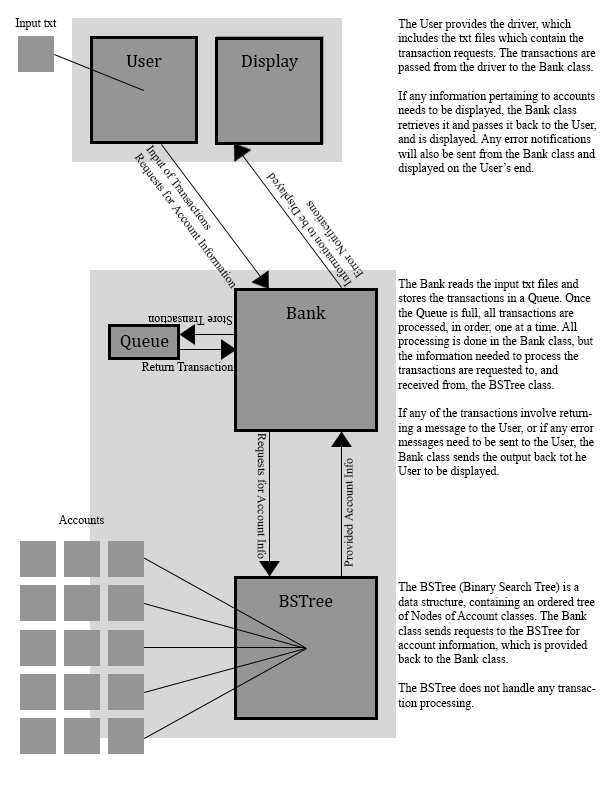
<style>
.page{position:relative;width:612px;height:792px;background:#ffffff}
.page>*{position:absolute;margin:0}
.t1{font:12px "TimesNewRomanPSMT";color:#000000}
.t2{font:18px "Cambria";color:#000000}
</style>
<div class="page">
<p class="t1" style="left:15px;top:18px;width:42px;height:12px">Input txt</p>
<p class="t1" style="left:398px;top:19px;width:199px;height:156px">The User provides the driver, which includes the txt files which contain the transaction requests. The transactions are passed from the driver to the Bank class. <br><br>If any information pertaining to accounts needs to be displayed, the Bank class retrieves it and passes it back to the User, and is displayed. Any error notifications will also be sent from the Bank class and displayed on the User’s end.</p>
<p class="t2" style="left:241px;top:54px;width:58px;height:17px">Display</p>
<p class="t2" style="left:126px;top:55px;width:36px;height:12px">User</p>
<p class="t1" style="left:134px;top:144px;width:102px;height:145px;rotate:53deg">Input of Transactions<br>Requests for Account Information</p>
<p class="t1" style="left:266px;top:172px;width:98px;height:116px;rotate:-126deg">Information to be Displayed<br>Error Notifications</p>
<p class="t1" style="left:398px;top:279px;width:196px;height:199px">The Bank reads the input txt files and stores the transactions in a Queue. Once the Queue is full, all transactions are processed, in order, one at a time. All processing is done in the Bank class, but the information needed to process the transactions are requested to, and received from, the BSTree class. <br><br>If any of the transactions involve returning a message to the User, or if any error messages need to be sent to the User, the Bank class sends the output back tot he User to be displayed.</p>
<p class="t1" style="left:148px;top:316px;width:85px;height:9px;rotate:180deg">Store Transaction</p>
<p class="t2" style="left:286px;top:306px;width:40px;height:13px">Bank</p>
<p class="t2" style="left:120px;top:335px;width:49px;height:15px">Queue</p>
<p class="t1" style="left:141px;top:362px;width:93px;height:9px">Return Transaction</p>
<p class="t1" style="left:255px;top:433px;width:12px;height:126px;rotate:90deg">Requests for Account Info</p>
<p class="t1" style="left:344px;top:458px;width:9px;height:109px;rotate:-90deg">Provided Account Info</p>
<p class="t1" style="left:58px;top:515px;width:46px;height:9px">Accounts</p>
<p class="t1" style="left:398px;top:582px;width:198px;height:128px">The BSTree (Binary Search Tree) is a data structure, containing an ordered tree of Nodes of Account classes. The Bank class sends requests to the BSTree for account information, which is provided back to the Bank class.<br><br>The BSTree does not handle any transaction processing.</p>
<p class="t2" style="left:279px;top:595px;width:54px;height:12px">BSTree</p>
</div>
